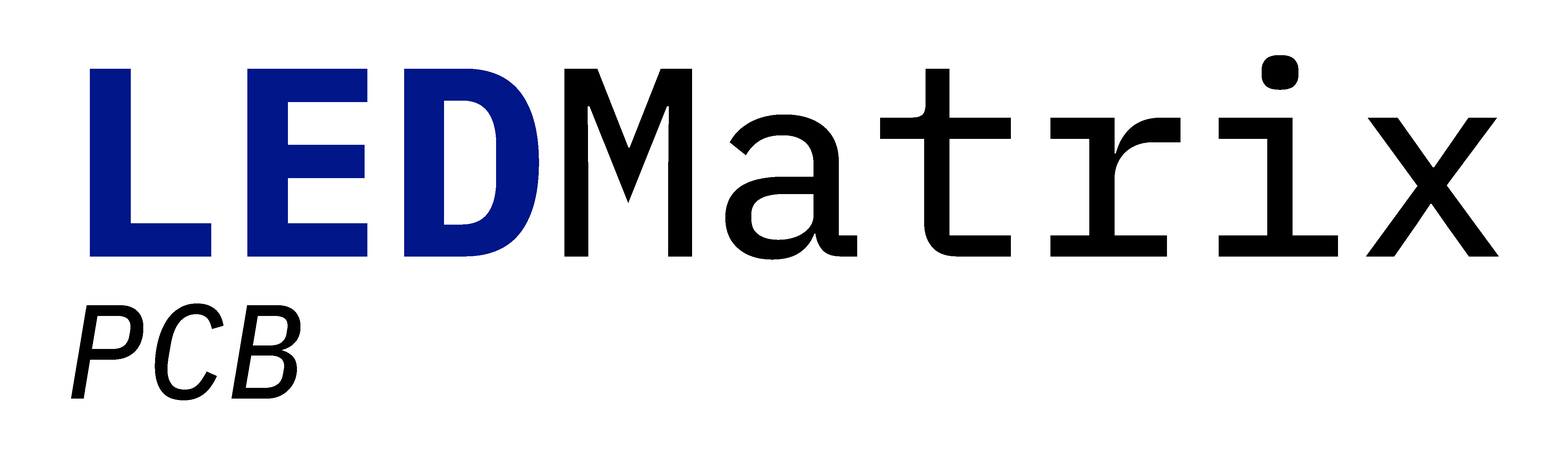
<style>
.page{position:relative;width:1568px;height:467px;background:#ffffff}
.page>*{position:absolute;margin:0}
.t1{font:268px "IBMPlexMono-Text";color:#000000}
.t2{font:268px "IBMPlexMono-Bold";color:#001689}
.t3{font:133.9px "IBMPlexMono-TextItalic";color:#000000}
</style>
<div class="page">
<p class="t1" style="left:96px;top:55px;width:1403px;height:204px">LEDMatrix</p>
<p class="t2" style="left:90px;top:69px;width:449px;height:187px">LED</p>
<p class="t3" style="left:71px;top:303px;width:229px;height:97px">PCB</p>
</div>
